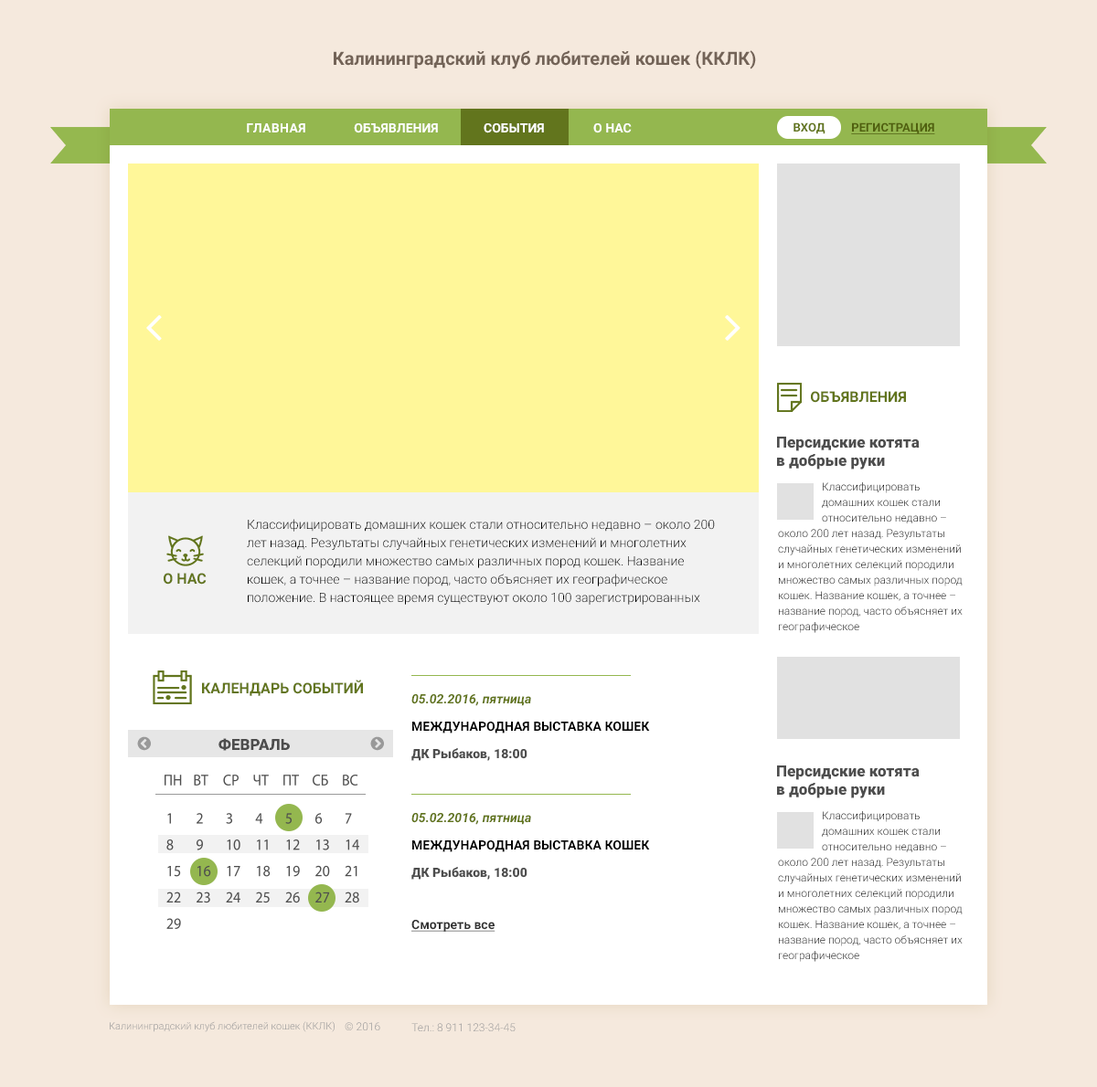
<style>
.page{position:relative;width:1097px;height:1087px;background:#f5e9dd}
.page>*{position:absolute;margin:0}
.t1{font:18.3px "Roboto-Bold";color:#736357}
.t2{font:12.8px "Roboto-Bold";letter-spacing:0.025em;color:#fffffe}
.t3{font:12.8px "Roboto-Bold";color:#ffffff}
.t4{font:11.9px "Roboto-Bold";color:#62751d}
.t5{font:11.9px "Roboto-Bold";color:#50600f;text-decoration:underline}
.t6{font:14.6px "Roboto-Bold";color:#62751d}
.t7{font:15.5px/18.3px "Roboto-Regular";color:#4d4d4d}
.t8{font:11px/15.5px "Roboto-Light";color:#000000}
.t9{font:12.8px/18.3px "Roboto-Light";color:#000000}
.t10{font:12.8px "Roboto-BoldItalic";color:#62751d}
.t11{font:12.8px "Roboto-Bold";color:#000000}
.t12{font:15.5px "Roboto-Regular";color:#4d4d4d}
.t13{font:12.8px "Roboto-Regular";color:#4d4d4d}
.t14{font:12.8px "Roboto-Bold";color:#333333;text-decoration:underline}
.t15{font:10.1px "Roboto-Light";color:#999999}
.t16{font:11px "Roboto-Light"}
.t17{font:11px "Roboto-Light";color:#999999}
</style>
<div class="page">
<p class="t1" style="left:334px;top:50px;width:422px;height:19px">Калининградский клуб любителей кошек (ККЛК)</p>
<p class="t2" style="left:247px;top:123px;width:58px;height:10px">ГЛАВНАЯ</p>
<p class="t3" style="left:354px;top:123px;width:84px;height:10px">ОБЪЯВЛЕНИЯ</p>
<p class="t3" style="left:483px;top:123px;width:61px;height:10px">СОБЫТИЯ</p>
<p class="t3" style="left:593px;top:123px;width:38px;height:10px">О НАС</p>
<p class="t4" style="left:793px;top:122px;width:32px;height:12px">ВХОД</p>
<p class="t5" style="left:851px;top:122px;width:84px;height:12px">РЕГИСТРАЦИЯ</p>
<p class="t6" style="left:811px;top:391px;width:95px;height:12px">ОБЪЯВЛЕНИЯ</p>
<p class="t7" style="left:777px;top:437px;width:142px;height:33px">Персидские котята<br>в добрые руки</p>
<p class="t8" style="left:778px;top:482px;width:184px;height:151px">Классифицировать домашних кошек стали относительно недавно – около 200 лет назад. Результаты случайных генетических изменений и многолетних селекций породили множество самых различных пород кошек. Название кошек, а точнее – название пород, часто объясняет их географическое</p>
<p class="t9" style="left:247px;top:519px;width:468px;height:86px">Классифицировать домашних кошек стали относительно недавно – около 200 лет назад. Результаты случайных генетических изменений и многолетних селекций породили множество самых различных пород кошек. Название кошек, а точнее – название пород, часто объясняет их географическое положение. В настоящее время существуют около 100 зарегистрированных пород, а внутри каждой</p>
<p class="t6" style="left:164px;top:573px;width:43px;height:12px">О НАС</p>
<p class="t6" style="left:202px;top:680px;width:161px;height:16px">КАЛЕНДАРЬ СОБЫТИЙ</p>
<p class="t10" style="left:411px;top:694px;width:120px;height:12px">05.02.2016, пятница</p>
<p class="t11" style="left:412px;top:722px;width:238px;height:12px">МЕЖДУНАРОДНАЯ ВЫСТАВКА КОШЕК</p>
<p class="t12" style="left:218px;top:738px;width:72px;height:13px">ФЕВРАЛЬ</p>
<p class="t13" style="left:411px;top:748px;width:116px;height:13px">ДК Рыбаков, 18:00</p>
<p class="t7" style="left:777px;top:766px;width:142px;height:33px">Персидские котята<br>в добрые руки</p>
<p class="t10" style="left:411px;top:813px;width:120px;height:12px">05.02.2016, пятница</p>
<p class="t8" style="left:778px;top:811px;width:184px;height:151px">Классифицировать домашних кошек стали относительно недавно – около 200 лет назад. Результаты случайных генетических изменений и многолетних селекций породили множество самых различных пород кошек. Название кошек, а точнее – название пород, часто объясняет их географическое</p>
<p class="t11" style="left:412px;top:841px;width:238px;height:12px">МЕЖДУНАРОДНАЯ ВЫСТАВКА КОШЕК</p>
<p class="t13" style="left:411px;top:867px;width:116px;height:13px">ДК Рыбаков, 18:00</p>
<p class="t14" style="left:411px;top:920px;width:84px;height:12px">Смотреть все</p>
<p class="t15" style="left:110px;top:1022px;width:224px;height:11px">Калининградский клуб любителей кошек (ККЛК)</p>
<p class="t16" style="left:345px;top:1023px;width:35px;height:8px">© 2016</p>
<p class="t17" style="left:411px;top:1023px;width:104px;height:9px">Тел.: 8 911 123-34-45</p>
</div>
